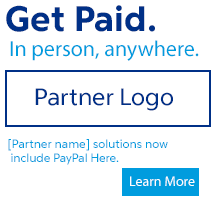
<style>
.page{position:relative;width:220px;height:200px;background:#ffffff}
.page>*{position:absolute;margin:0}
.t1{font:36px "PayPalForward-Bold";color:#003087}
.t2{font:22px "MyriadPro-Regular";color:#009cde}
.t3{font:24px "PayPalForward-Regular";color:#003087}
.t4{font:12px/24.3px "PayPalForward-Regular";color:#009cde}
.t5{font:14px "MyriadPro-Regular";color:#ffffff}
</style>
<div class="page">
<p class="t1" style="left:6px;top:5px;width:149px;height:27px">Get Paid.</p>
<p class="t2" style="left:10px;top:40px;width:189px;height:21px">In person, anywhere.</p>
<p class="t3" style="left:35px;top:88px;width:138px;height:23px">Partner Logo</p>
<p class="t4" style="left:8px;top:139px;width:160px;height:26px">[Partner name] solutions now<br> include PayPal Here.</p>
<p class="t5" style="left:130px;top:176px;width:65px;height:10px">Learn More</p>
</div>
